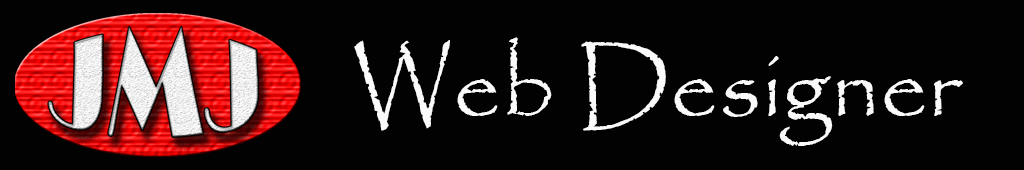
<style>
.page{position:relative;width:1024px;height:170px;background:#020202}
.page>*{position:absolute;margin:0}
.t1{font:95px "Papyrus-Regular";color:#fbfafa}
</style>
<div class="page">
<p class="t1" style="left:354px;top:37px;width:609px;height:109px">Web Designer</p>
</div>
